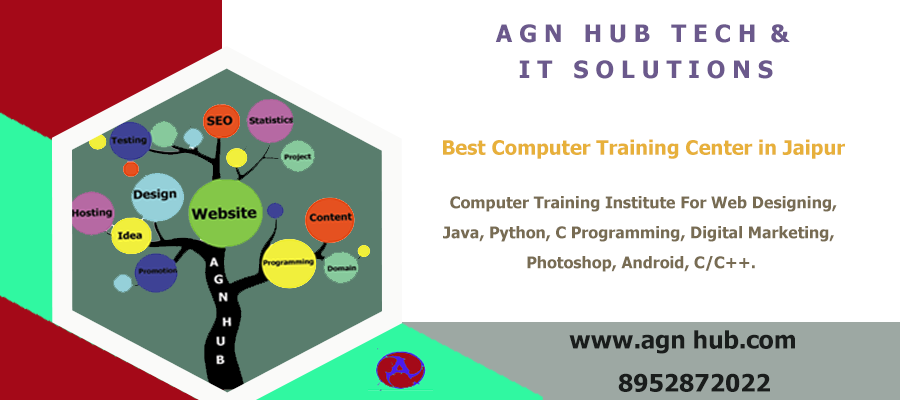
<style>
.page{position:relative;width:900px;height:400px;background:#ffffff}
.page>*{position:absolute;margin:0}
.t1{font:24px/36px "Tahoma-Bold";color:#6b598c}
.t2{font:20px "Tahoma-Bold";color:#e7b03b}
.t3{font:16px/30px "Tahoma-Bold";color:#786c53}
.t4{font:24px "Tahoma-Bold";color:#1a1d1c}
</style>
<div class="page">
<p class="t1" style="left:495px;top:24px;width:295px;height:55px;text-align:center">A G N   H U B   T E C H  &amp; <br>I T   S O L U T I O N S</p>
<p class="t2" style="left:443px;top:139px;width:402px;height:20px">Best Computer Training Center in Jaipur</p>
<p class="t3" style="left:443px;top:196px;width:394px;height:76px;text-align:center">Computer Training Institute For Web Designing,<br>Java, Python, C Programming, Digital Marketing, <br>Photoshop, Android, C/C++.</p>
<p class="t4" style="left:569px;top:330px;width:226px;height:24px">www.agn hub.com</p>
<p class="t4" style="left:618px;top:373px;width:152px;height:19px">8952872022</p>
</div>
